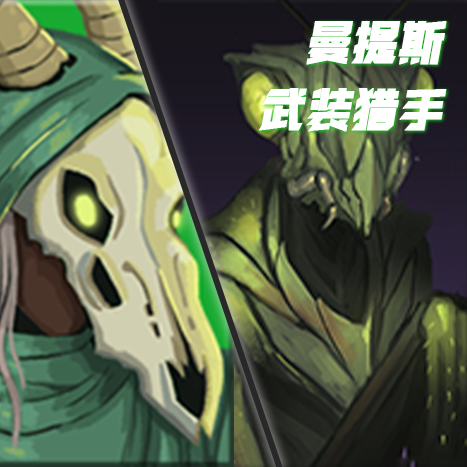
<style>
.page{position:relative;width:467px;height:467px}
.page>*{position:absolute;margin:0}
.t1{font:42.7px/66.7px "REEJI-HonghuangLi-BlodGB1.0";letter-spacing:0.05em;color:#ffffff;font-weight:bold;font-style:italic}
</style>
<div class="page">
<p class="t1" style="left:258px;top:21px;width:189px;height:111px;text-align:right">曼提斯<br>武装猎手</p>
</div>
